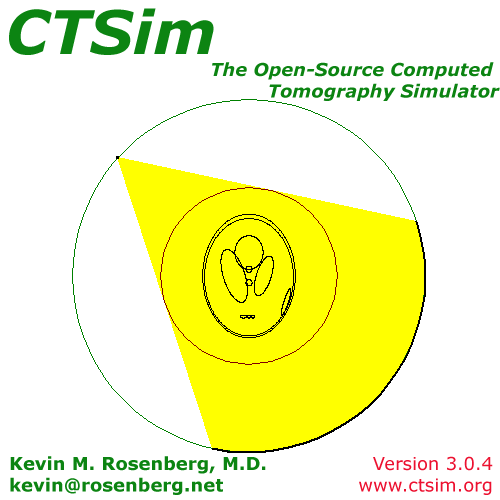
<style>
.page{position:relative;width:500px;height:500px;background:#ffffff}
.page>*{position:absolute;margin:0}
.t1{font:60px "Verdana-BoldItalic";color:#0c8412}
.t2{font:18px "Verdana-BoldItalic";color:#0c8412}
.t3{font:18px "Verdana-Bold";color:#0c8412}
.t4{font:18px "Verdana";color:#ec1130}
</style>
<div class="page">
<p class="t1" style="left:9px;top:8px;width:205px;height:47px">CTSim</p>
<p class="t2" style="left:212px;top:62px;width:288px;height:39px;text-align:right">The Open-Source Computed <br>Tomography Simulator</p>
<p class="t3" style="left:10px;top:456px;width:256px;height:39px">Kevin M. Rosenberg, M.D.<br>kevin@rosenberg.net</p>
<p class="t4" style="left:359px;top:456px;width:134px;height:39px;text-align:right">Version 3.0.4<br>www.ctsim.org</p>
</div>
